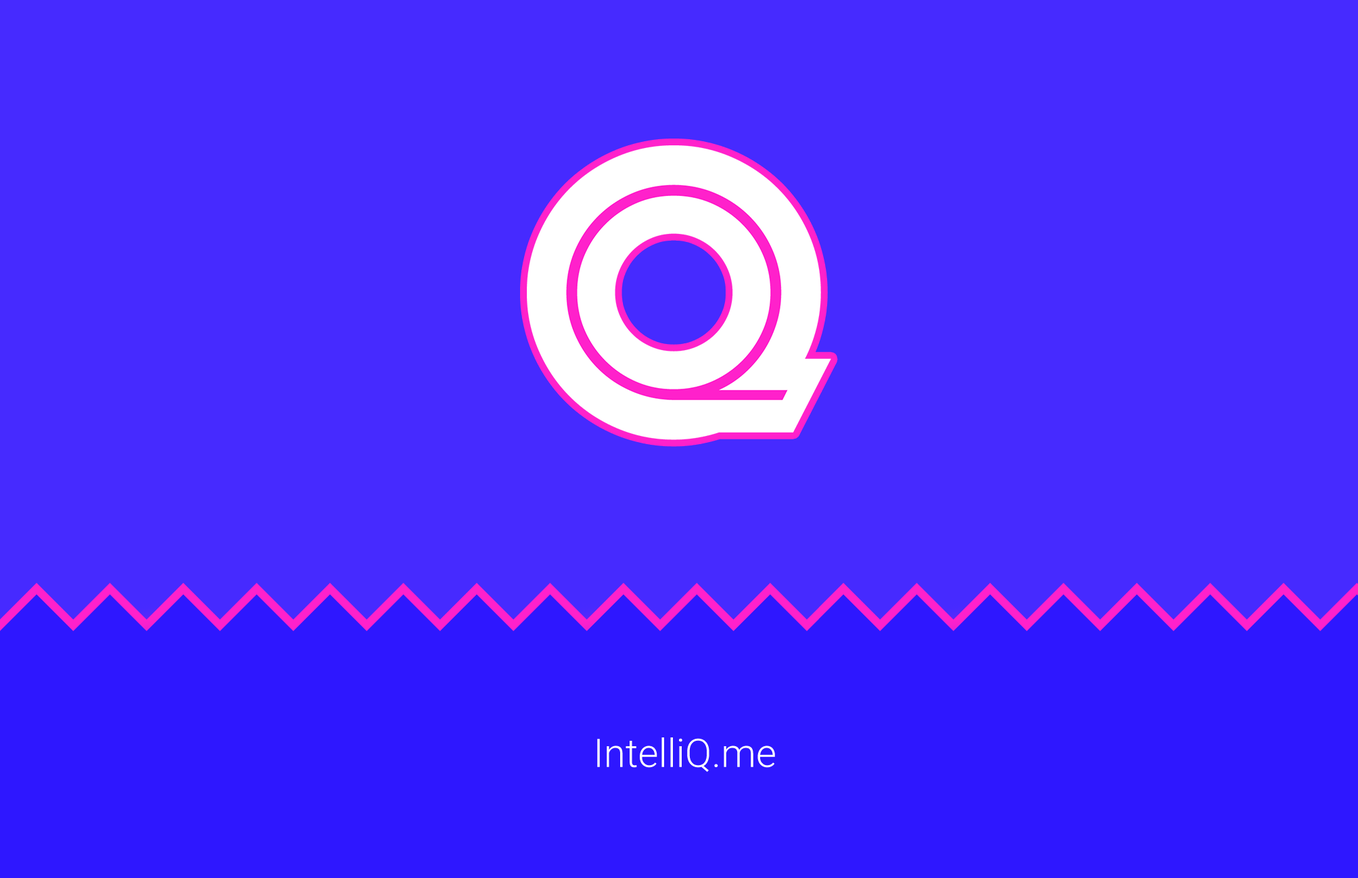
<style>
.page{position:relative;width:1358px;height:878px;background:#462aff}
.page>*{position:absolute;margin:0}
.t1{font:39.4px "Roboto-Light";color:#ffffff}
</style>
<div class="page">
<p class="t1" style="left:597px;top:738px;width:178px;height:34px">IntelliQ.me</p>
</div>
